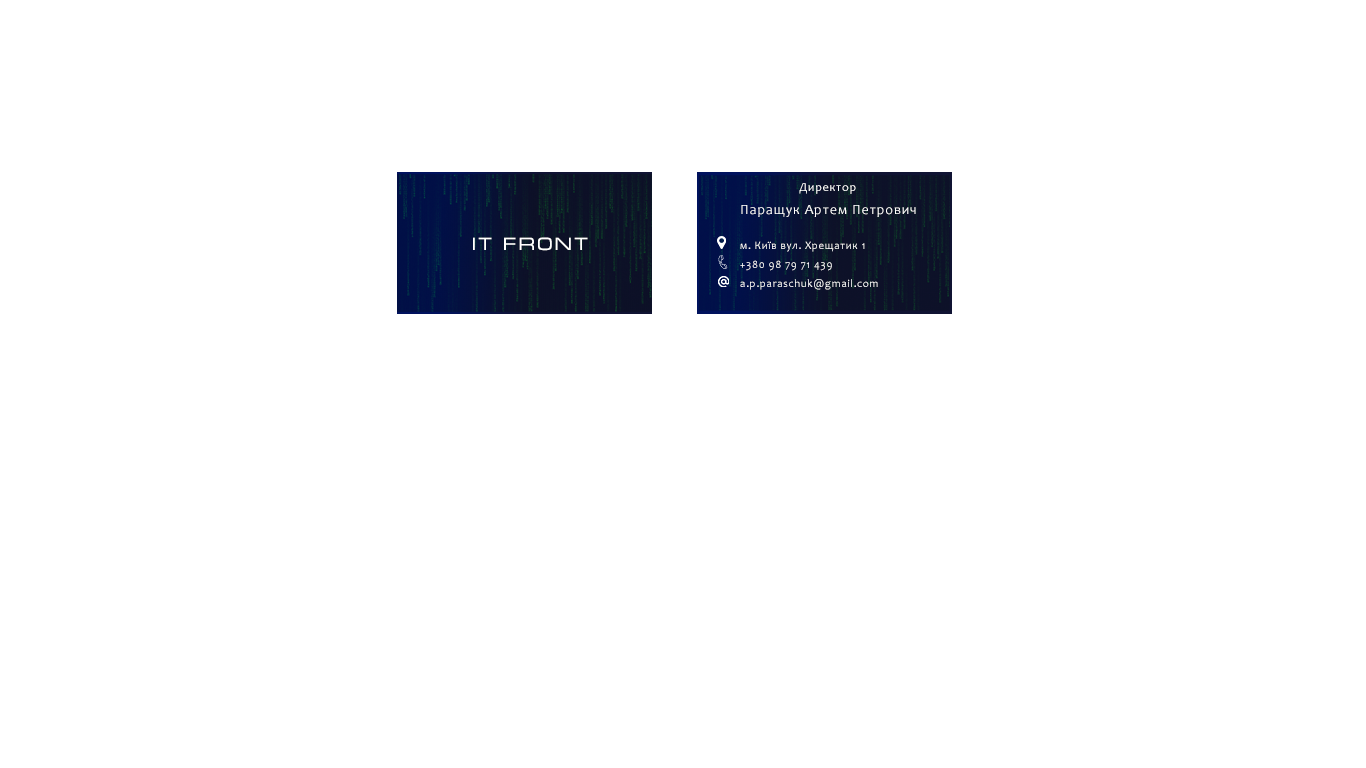
<style>
.page{position:relative;width:1366px;height:768px;background:#ffffff}
.page>*{position:absolute;margin:0}
.t1{font:12px "Candara";letter-spacing:0.06em;color:#ffffff}
.t2{font:14px "Candara";letter-spacing:0.06em;color:#ffffff}
.t3{font:18px "MicraC";letter-spacing:0.06em;color:#ffffff}
.t4{font:24px "MicraC";letter-spacing:0.06em;color:#ffffff}
.t5{font:11px "Candara";letter-spacing:0.06em;color:#ffffff}
</style>
<div class="page">
<p class="t1" style="left:799px;top:183px;width:57px;height:11px">Директор</p>
<p class="t2" style="left:741px;top:205px;width:175px;height:12px">Паращук Артем Петрович</p>
<p class="t3" style="left:473px;top:237px;width:115px;height:14px"><span class="t4"> </span>IT Front</p>
<p class="t5" style="left:740px;top:241px;width:125px;height:11px">м. Київ вул. Хрещатик 1</p>
<p class="t5" style="left:740px;top:260px;width:92px;height:11px">+380 98 79 71 439</p>
<p class="t5" style="left:740px;top:279px;width:138px;height:11px">a.p.paraschuk@gmail.com</p>
</div>
